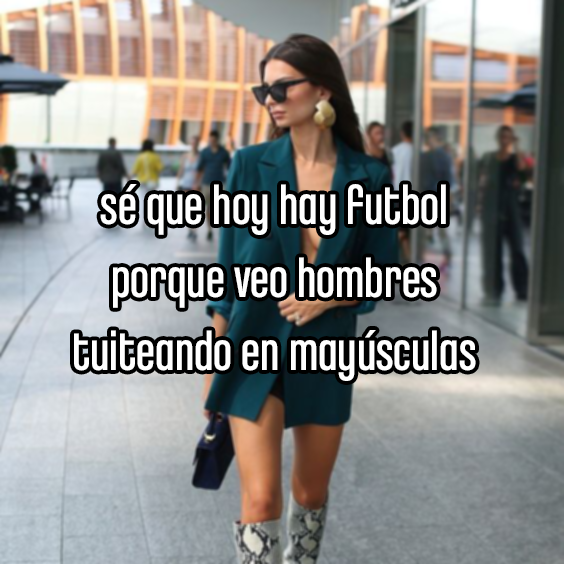
<style>
.page{position:relative;width:564px;height:564px}
.page>*{position:absolute;margin:0}
.t1{font:57.2px "ChaletComprime-CologneEighty";color:#ffffff}
</style>
<div class="page">
<p class="t1" style="left:74px;top:184px;width:402px;height:197px;text-align:center">sé que hoy hay futbol<br>porque veo hombres<br>tuiteando en mayúsculas</p>
</div>
